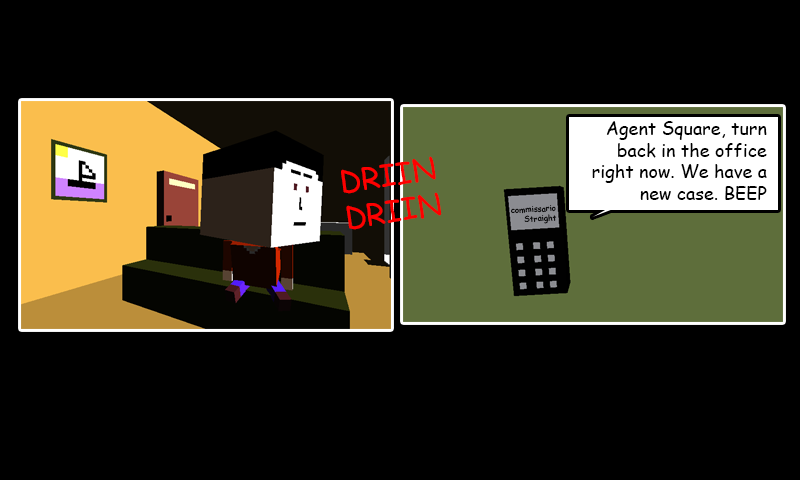
<style>
.page{position:relative;width:800px;height:480px;background:#000000}
.page>*{position:absolute;margin:0}
.t1{font:18px "ComicSansMS";color:#000000}
.t2{font:30px "ComicSansMS";color:#fe0000}
.t3{font:8px "ComicSansMS";color:#000000}
</style>
<div class="page">
<p class="t1" style="left:592px;top:121px;width:175px;height:79px;text-align:right">Agent Square, turn<br>back in the office<br>right now. We have a<br>new case. BEEP</p>
<p class="t2" style="left:341px;top:156px;width:101px;height:74px;text-align:right;rotate:-9deg">DRIIN<br>DRIIN</p>
<p class="t3" style="left:511px;top:205px;width:46px;height:19px;text-align:right;rotate:-3deg">commissario<br>Straight</p>
</div>
